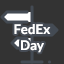
<style>
.page{position:relative;width:64px;height:64px;background:#333333}
.page>*{position:absolute;margin:0}
.t1{font:13.3px "Lato-Bold";color:#ffffff}
</style>
<div class="page">
<p class="t1" style="left:14px;top:24px;width:37px;height:29px;text-align:center">FedEx<br>Day</p>
</div>
